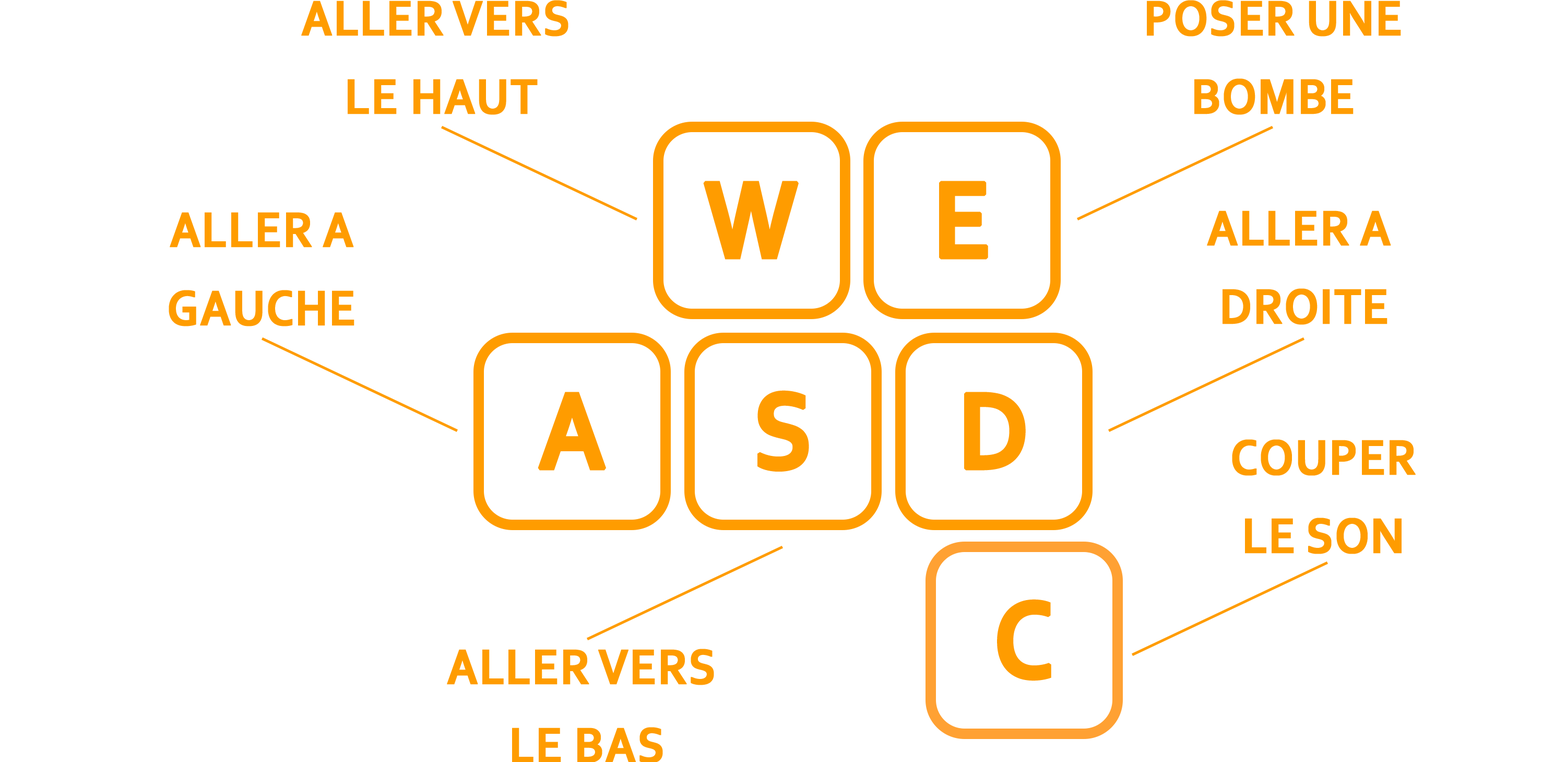
<style>
.page{position:relative;width:1566px;height:762px;background:#ffffff}
.page>*{position:absolute;margin:0}
.t1{font:52.2px/78.3px "Corbel-Bold";color:#ff9c00;text-transform:uppercase;font-weight:bold;scale:0.9 1}
.t2{font:114.4px "Corbel-Bold";color:#ff9c00;text-transform:uppercase;font-weight:bold;scale:0.9 1}
.t3{font:52.3px/78.4px "Corbel-Bold";color:#ff9c00;text-transform:uppercase;font-weight:bold;scale:0.9 1}
.t4{font:114.3px "Corbel-Bold";color:#ff9c00;text-transform:uppercase;font-weight:bold;scale:0.9 1}
</style>
<div class="page">
<p class="t1" style="left:301px;top:0px;width:267px;height:115px;text-align:center">Aller vers <br>le haut</p>
<p class="t1" style="left:1147px;top:0px;width:254px;height:115px;text-align:center">Poser une<br>bombe</p>
<p class="t2" style="left:703px;top:181px;width:96px;height:78px">W</p>
<p class="t2" style="left:939px;top:181px;width:49px;height:78px">E</p>
<p class="t1" style="left:169px;top:212px;width:185px;height:114px;text-align:center">Aller a<br>gauche</p>
<p class="t1" style="left:1207px;top:210px;width:184px;height:115px;text-align:center">Aller a <br>droite</p>
<p class="t2" style="left:757px;top:390px;width:52px;height:81px">S</p>
<p class="t2" style="left:538px;top:391px;width:68px;height:79px">A</p>
<p class="t2" style="left:964px;top:391px;width:62px;height:79px">D</p>
<p class="t3" style="left:1232px;top:439px;width:184px;height:115px;text-align:center">Couper<br>le son</p>
<p class="t4" style="left:997px;top:599px;width:54px;height:82px">C</p>
</div>
